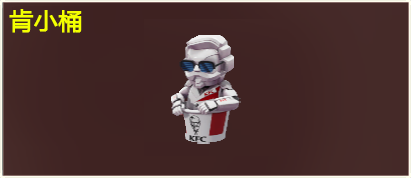
<style>
.page{position:relative;width:411px;height:178px}
.page>*{position:absolute;margin:0}
.t1{font:24px "MicrosoftYaHeiUI";color:#f4ff00;font-weight:bold}
</style>
<div class="page">
<p class="t1" style="left:9px;top:9px;width:73px;height:24px">肯小桶</p>
</div>
